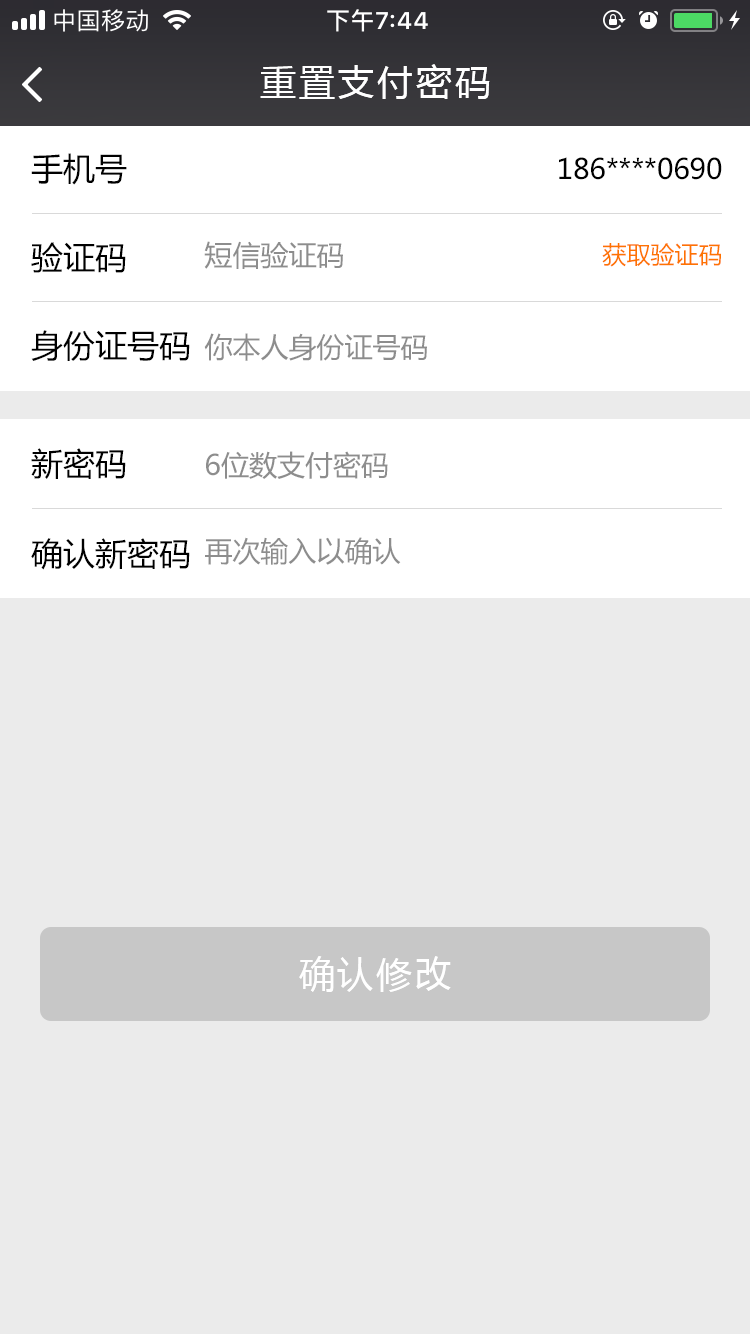
<style>
.page{position:relative;width:750px;height:1334px;background:#ebebeb}
.page>*{position:absolute;margin:0}
.t1{font:36px "MicrosoftYaHei";letter-spacing:0.08em;color:#ffffff}
.t2{font:32px "MicrosoftYaHei";color:#000000}
.t3{font:28px "MicrosoftYaHei";color:#000000}
.t4{font:28px "MicrosoftYaHei";color:#8d8d8d}
.t5{font:24px "MicrosoftYaHei";color:#fe7301}
</style>
<div class="page">
<p class="t1" style="left:260px;top:64px;width:230px;height:35px">重置支付密码</p>
<p class="t2" style="left:31px;top:153px;width:96px;height:32px">手机号</p>
<p class="t3" style="left:559px;top:157px;width:163px;height:23px">186****0690</p>
<p class="t2" style="left:31px;top:242px;width:95px;height:31px">验证码</p>
<p class="t4" style="left:204px;top:241px;width:139px;height:28px">短信验证码</p>
<p class="t5" style="left:602px;top:243px;width:119px;height:24px">获取验证码</p>
<p class="t2" style="left:31px;top:330px;width:159px;height:31px">身份证号码</p>
<p class="t4" style="left:204px;top:333px;width:223px;height:28px">你本人身份证号码</p>
<p class="t2" style="left:31px;top:448px;width:95px;height:31px">新密码</p>
<p class="t4" style="left:206px;top:451px;width:182px;height:28px">6位数支付密码</p>
<p class="t2" style="left:31px;top:538px;width:159px;height:32px">确认新密码</p>
<p class="t4" style="left:205px;top:537px;width:196px;height:28px">再次输入以确认</p>
<p class="t1" style="left:299px;top:956px;width:152px;height:36px">确认修改</p>
</div>
